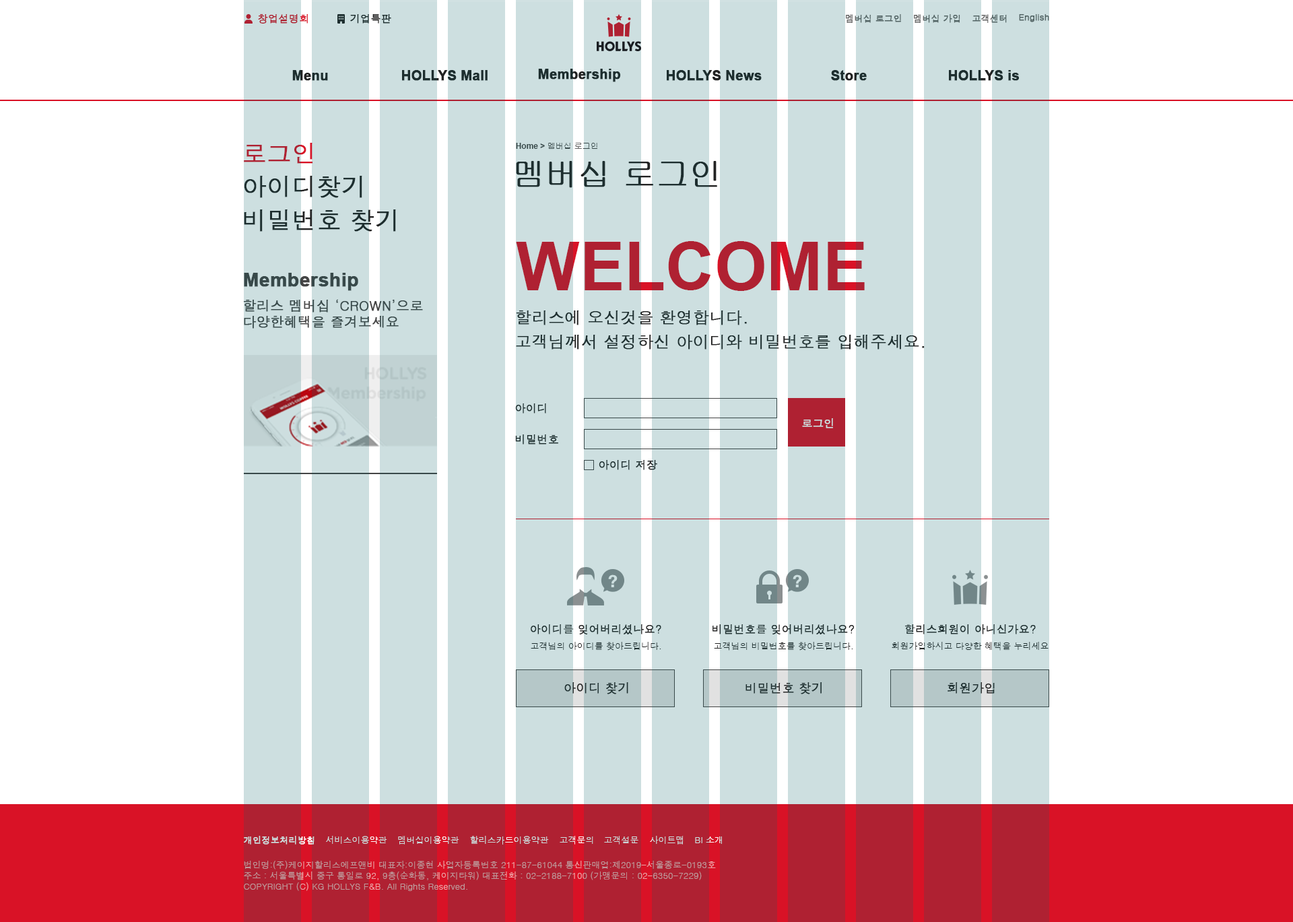
<style>
.page{position:relative;width:1293px;height:922px;background:#ffffff}
.page>*{position:absolute;margin:0}
.t1{font:10.1px "Dotum";color:#af2132;font-weight:bold}
.t2{font:10.1px "Dotum";color:#222222;font-weight:bold}
.t3{font:8.8px "Dotum";color:#666666;font-weight:bold}
.t4{font:13.5px "Arial-BoldMT";color:#222222;font-weight:bold}
.t5{font:24.2px "Dotum";color:#af2132;font-weight:bold}
.t6{font:8.1px "Gulim";color:#444444}
.t7{font:8.1px "Arial-BoldMT";color:#444444}
.t8{font:32.3px "Gulim";color:#222222;font-weight:bold}
.t9{font:24.2px "Dotum";color:#222222;font-weight:bold}
.t10{font:67.4px "Arial-BoldMT";color:#af2132}
.t11{font:18.9px "Arial-BoldMT";color:#444444;font-weight:bold}
.t12{font:13.5px "Dotum";color:#444444;font-weight:bold}
.t13{font:16.2px/24.2px "Dotum";color:#222222;font-weight:bold}
.t14{font:10.8px "Dotum";color:#222222;font-weight:bold}
.t15{font:10.8px "Dotum";color:#cddfe0;font-weight:bold}
.t16{font:8.8px "Dotum";color:#222222}
.t17{font:12.1px "Dotum";color:#222222;font-weight:bold}
.t18{font:8.8px "Dotum";color:#cddfe0;font-weight:bold}
.t19{font:8.8px "Dotum";color:#cddfe0}
.t20{font:8.8px "Dotum"}
.t21{font:8.8px "Dotum";color:#bf999c}
</style>
<div class="page">
<p class="t1" style="left:258px;top:14px;width:50px;height:10px">창업설명회</p>
<p class="t2" style="left:350px;top:14px;width:41px;height:10px">기업특판</p>
<p class="t3" style="left:846px;top:14px;width:55px;height:9px">멤버십 로그인</p>
<p class="t3" style="left:914px;top:14px;width:46px;height:9px">멤버십 가입</p>
<p class="t3" style="left:973px;top:14px;width:34px;height:9px">고객센터</p>
<p class="t3" style="left:1019px;top:14px;width:30px;height:8px">English</p>
<p class="t4" style="left:292px;top:70px;width:36px;height:11px">Menu</p>
<p class="t4" style="left:402px;top:70px;width:86px;height:11px">HOLLYS Mall</p>
<p class="t4" style="left:538px;top:69px;width:83px;height:13px">Membership</p>
<p class="t4" style="left:667px;top:70px;width:95px;height:11px">HOLLYS News</p>
<p class="t4" style="left:831px;top:70px;width:36px;height:11px">Store</p>
<p class="t4" style="left:949px;top:70px;width:70px;height:11px">HOLLYS is</p>
<p class="t5" style="left:244px;top:143px;width:69px;height:21px">로그인</p>
<p class="t6" style="left:516px;top:142px;width:81px;height:8px"><span class="t7">Home &gt; </span>멤버십 로그인</p>
<p class="t8" style="left:516px;top:161px;width:201px;height:27px">멤버십 로그인</p>
<p class="t9" style="left:244px;top:176px;width:118px;height:22px">아이디찾기</p>
<p class="t9" style="left:244px;top:209px;width:152px;height:23px">비밀번호 찾기</p>
<p class="t10" style="left:516px;top:241px;width:349px;height:50px">WELCOME</p>
<p class="t11" style="left:244px;top:273px;width:114px;height:18px">Membership</p>
<p class="t12" style="left:243px;top:299px;width:180px;height:30px">할리스 멤버십 ‘CROWN’으로<br>다양한혜택을 즐겨보세요</p>
<p class="t13" style="left:516px;top:311px;width:409px;height:39px">할리스에 오신것을 환영합니다.<br>고객님께서 설정하신 아이디와 비밀번호를 입해주세요.</p>
<p class="t14" style="left:515px;top:403px;width:31px;height:11px">아이디</p>
<p class="t15" style="left:802px;top:418px;width:31px;height:10px">로그인</p>
<p class="t14" style="left:515px;top:434px;width:43px;height:11px">비밀번호</p>
<p class="t14" style="left:599px;top:460px;width:58px;height:10px">아이디 저장</p>
<p class="t14" style="left:531px;top:624px;width:130px;height:10px">아이디를 잊어버리셨나요?</p>
<p class="t14" style="left:713px;top:624px;width:142px;height:10px">비밀번호를 잊어버리셨나요?</p>
<p class="t14" style="left:905px;top:624px;width:131px;height:10px">할리스회원이 아니신가요?</p>
<p class="t16" style="left:531px;top:642px;width:130px;height:9px">고객님의 아이디를 찾아드립니다.</p>
<p class="t16" style="left:714px;top:642px;width:139px;height:9px">고객님의 비밀번호를 찾아드립니다.</p>
<p class="t16" style="left:892px;top:642px;width:157px;height:9px">회원가입하시고 다양한 혜택을 누리세요</p>
<p class="t17" style="left:564px;top:682px;width:64px;height:12px">아이디 찾기</p>
<p class="t17" style="left:746px;top:682px;width:76px;height:12px">비밀번호 찾기</p>
<p class="t17" style="left:948px;top:682px;width:47px;height:12px">회원가입</p>
<p class="t18" style="left:244px;top:836px;width:71px;height:9px">개인정보처리방침</p>
<p class="t19" style="left:326px;top:836px;width:61px;height:8px">서비스이용약관</p>
<p class="t19" style="left:398px;top:836px;width:61px;height:9px">멤버십이용약관</p>
<p class="t19" style="left:470px;top:836px;width:79px;height:9px">할리스카드이용약관</p>
<p class="t20" style="left:560px;top:836px;width:33px;height:9px">고객문의</p>
<p class="t19" style="left:604px;top:836px;width:35px;height:9px">고객설문</p>
<p class="t19" style="left:650px;top:836px;width:34px;height:9px">사이트맵</p>
<p class="t20" style="left:695px;top:837px;width:27px;height:7px">BI 소개</p>
<p class="t21" style="left:244px;top:861px;width:472px;height:30px">법인명:(주)케이지할리스에프앤비 대표자:이종현 사업자등록번호 211-87-61044 통신판매업:제2019-서울종로-0193호<br>주소 : 서울특별시 중구 통일로 92, 9층(순화동, 케이지타워) 대표전화 : 02-2188-7100 (가맹문의 : 02-6350-7229)<br>COPYRIGHT (C) KG HOLLYS F&amp;B. All Rights Reserved.</p>
</div>
